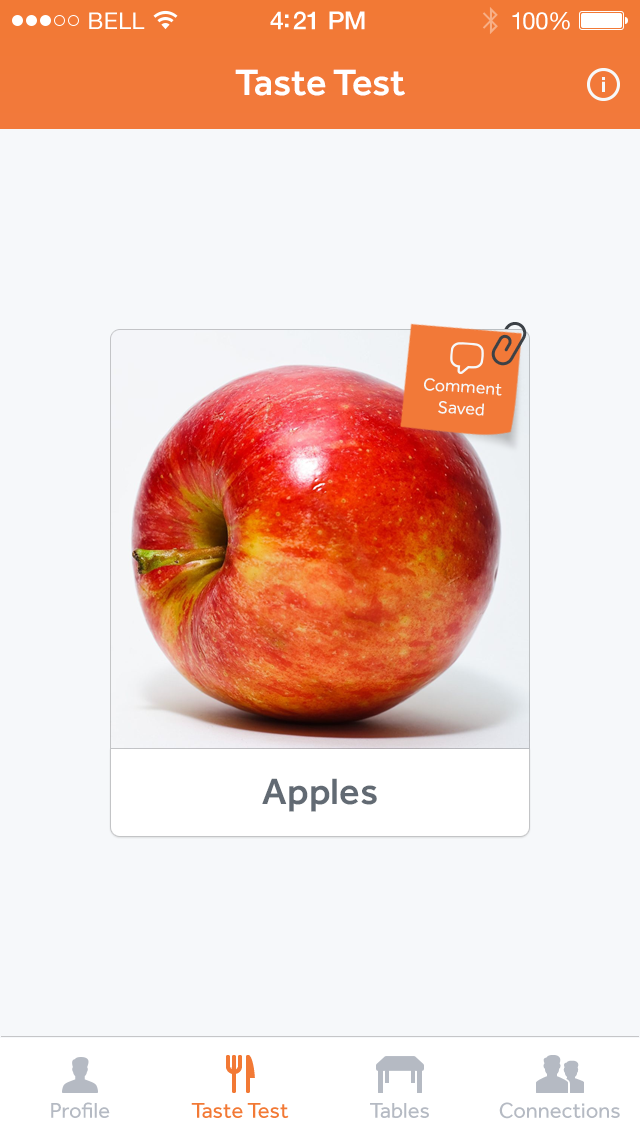
<style>
.page{position:relative;width:640px;height:1136px;background:#f6f8fa}
.page>*{position:absolute;margin:0}
.t1{font:23px "HelveticaNeue";letter-spacing:0.02em;color:#ffffff}
.t2{font:25px "HelveticaNeue-Medium";letter-spacing:-0.02em;color:#ffffff}
.t3{font:24px "HelveticaNeue";letter-spacing:-0.02em;color:#ffffff}
.t4{font:38px "Effra-Medium";color:#ffffff}
.t5{font:18px "Effra-Regular";color:#f6f8fa}
.t6{font:38px "Effra-Medium";color:#626a73}
.t7{font:22px "Effra-Regular";color:#b5bac3}
.t8{font:22px "Effra-Regular";color:#f27935}
</style>
<div class="page">
<p class="t1" style="left:89px;top:12px;width:56px;height:17px">BELL</p>
<p class="t2" style="left:270px;top:11px;width:95px;height:19px">4:21 PM</p>
<p class="t3" style="left:512px;top:12px;width:58px;height:18px">100%</p>
<p class="t4" style="left:235px;top:69px;width:170px;height:27px">Taste Test</p>
<p class="t5" style="left:424px;top:378px;width:78px;height:38px;text-align:center;rotate:4deg">Comment<br>Saved</p>
<p class="t6" style="left:262px;top:778px;width:115px;height:34px">Apples</p>
<p class="t7" style="left:51px;top:1102px;width:59px;height:16px">Profile</p>
<p class="t8" style="left:191px;top:1103px;width:98px;height:15px">Taste Test</p>
<p class="t7" style="left:370px;top:1103px;width:59px;height:15px">Tables</p>
<p class="t7" style="left:499px;top:1102px;width:121px;height:17px">Connections</p>
</div>
